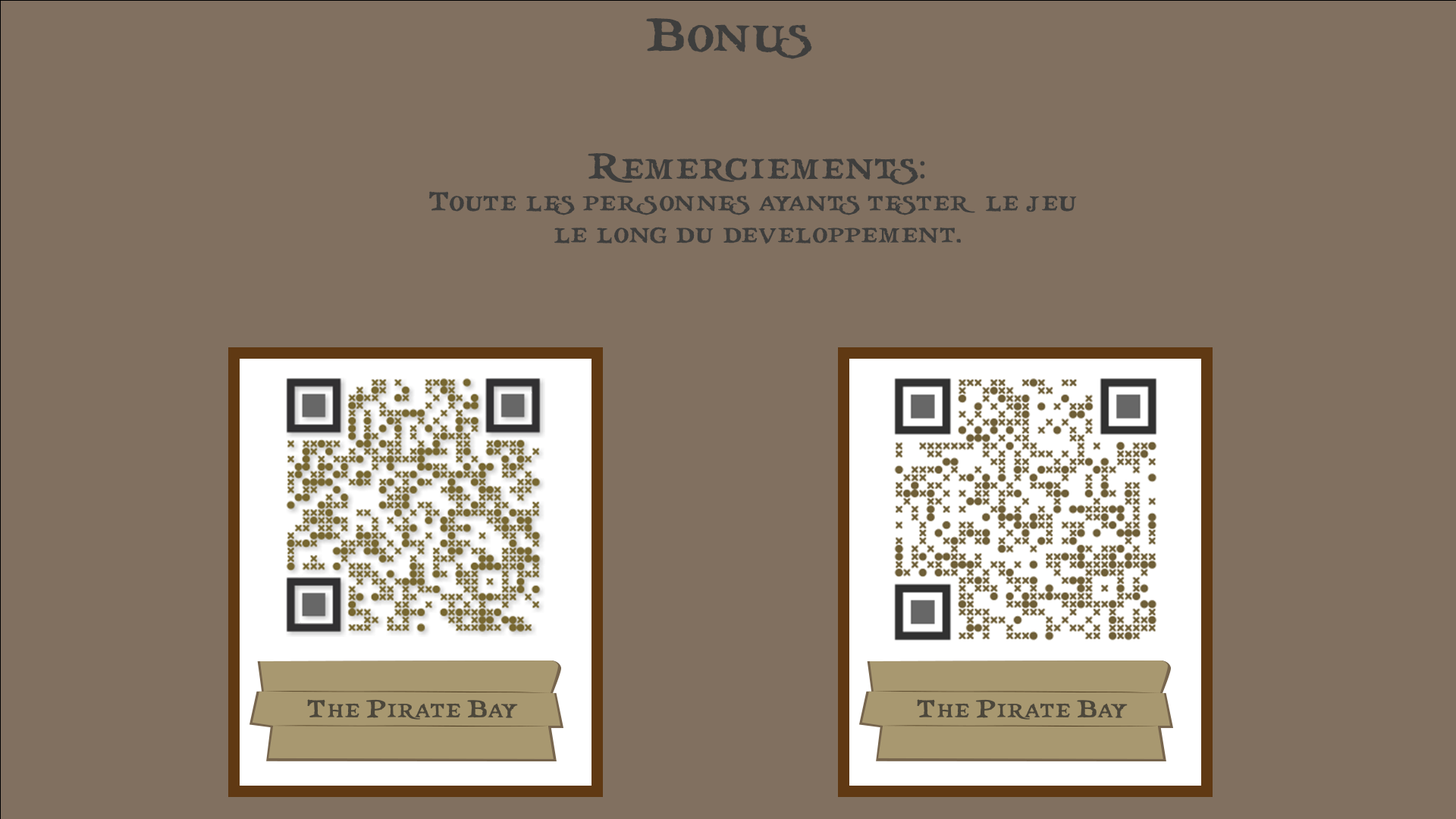
<style>
.page{position:relative;width:1456px;height:819px;background:#817060}
.page>*{position:absolute;margin:0}
.t1{font:47px "treasuremap";color:#3e3e3d}
.t2{font:26.5px "treasuremap";color:#3e3e3d}
.t3{font:36.4px "treasuremap";color:#3e3e3d}
.t4{font:36.4px "MyriadPro-Regular";color:#3e3e3d}
</style>
<div class="page">
<p class="t1" style="left:646px;top:18px;width:166px;height:41px">Bonus</p>
<p class="t2" style="left:429px;top:153px;width:648px;height:91px;text-align:center"><span class="t3">Remerciements</span><span class="t4">:<br></span>Toute les personnes ayants tester le jeu <br>le long du developpement.</p>
</div>
